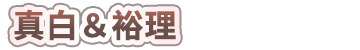
<style>
.page{position:relative;width:360px;height:50px;background:#ffffff}
.page>*{position:absolute;margin:0}
.t1{font:32px "SourceHanSansSC-Bold";font-weight:bold}
</style>
<div class="page">
<p class="t1" style="left:14px;top:9px;width:162px;height:32px">真白＆裕理</p>
</div>
